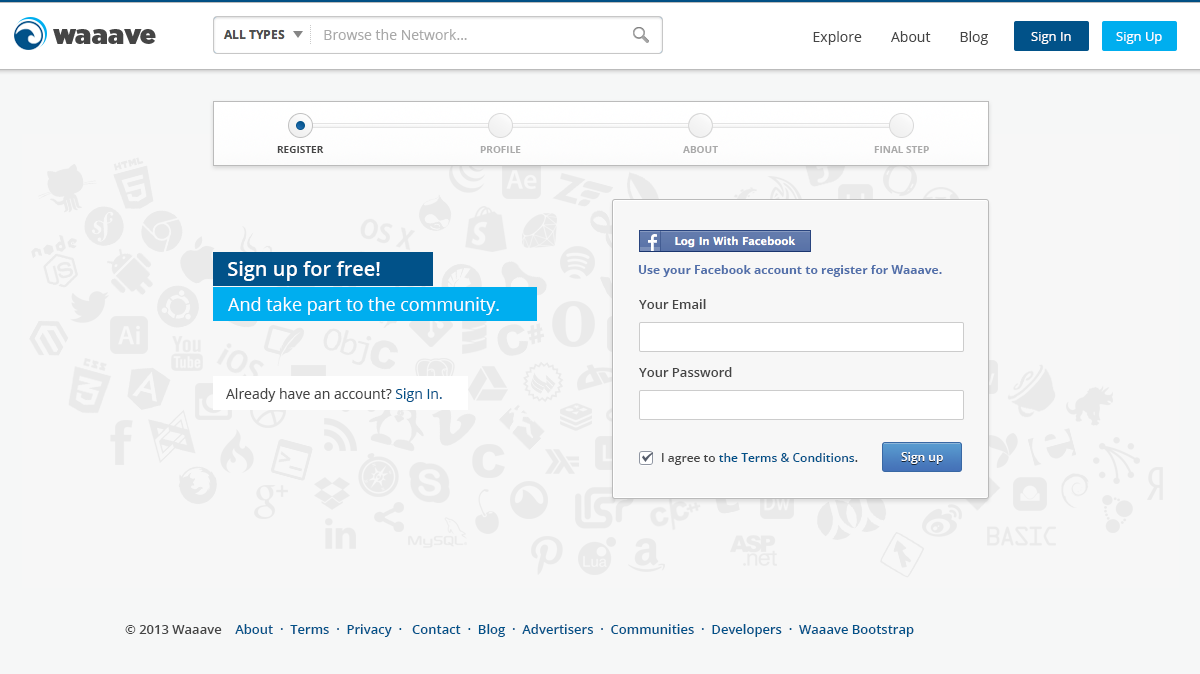
<style>
.page{position:relative;width:1200px;height:674px;background:#f7f7f7}
.page>*{position:absolute;margin:0}
.t1{font:14px "OpenSans";color:#a9a9a9}
.t2{font:14px "OpenSans";color:#454545}
.t3{font:13px "OpenSans";color:#ffffff}
.t4{font:10px "OpenSans-Bold";color:#454545}
.t5{font:10px "OpenSans-Bold";color:#aaaaaa}
.t6{font:20px "OpenSans-Semibold";color:#fefefe}
.t7{font:12px "OpenSans-Bold";color:#516faa}
.t8{font:18px "OpenSans";color:#fefefe}
.t9{font:13px "OpenSans-Semibold";color:#454545}
.t10{font:14px "OpenSans";color:#015289}
.t11{font:12px "OpenSans-Semibold";color:#015289}
.t12{font:12px "OpenSans-Semibold";color:#454545}
.t13{font:12px "OpenSans-Semibold";color:#ffffff}
.t14{font:13px "OpenSans-Semibold";color:#015289}
</style>
<div class="page">
<p class="t1" style="left:324px;top:29px;width:143px;height:11px">Browse the Network...</p>
<p class="t2" style="left:813px;top:31px;width:175px;height:14px">Explore        About        Blog</p>
<p class="t3" style="left:1031px;top:32px;width:40px;height:12px">Sign In</p>
<p class="t3" style="left:1116px;top:32px;width:46px;height:12px">Sign Up</p>
<p class="t4" style="left:277px;top:146px;width:47px;height:7px">REGISTER</p>
<p class="t5" style="left:480px;top:146px;width:41px;height:7px">PROFILE</p>
<p class="t5" style="left:683px;top:146px;width:35px;height:7px">ABOUT</p>
<p class="t5" style="left:874px;top:146px;width:55px;height:7px">FINAL STEP</p>
<p class="t6" style="left:228px;top:261px;width:152px;height:20px">Sign up for free!</p>
<p class="t7" style="left:638px;top:265px;width:304px;height:12px">Use your Facebook account to register for Waaave.</p>
<p class="t8" style="left:228px;top:297px;width:271px;height:18px">And take part to the community.</p>
<p class="t9" style="left:639px;top:299px;width:67px;height:10px">Your Email</p>
<p class="t9" style="left:639px;top:367px;width:93px;height:10px">Your Password</p>
<p class="t2" style="left:226px;top:388px;width:216px;height:14px">Already have an account? <span class="t10">Sign In.</span></p>
<p class="t11" style="left:662px;top:453px;width:196px;height:12px"><span class="t12">I agree to </span>the Terms &amp; Conditions<span class="t12">.</span></p>
<p class="t13" style="left:901px;top:452px;width:42px;height:12px">Sign up</p>
<p class="t14" style="left:125px;top:624px;width:789px;height:13px"><span class="t9">© 2013 Waaave</span>    About  ·  Terms  ·  Privacy  ·   Contact  ·  Blog  ·  Advertisers  ·  Communities  ·  Developers  ·  Waaave Bootstrap</p>
</div>
